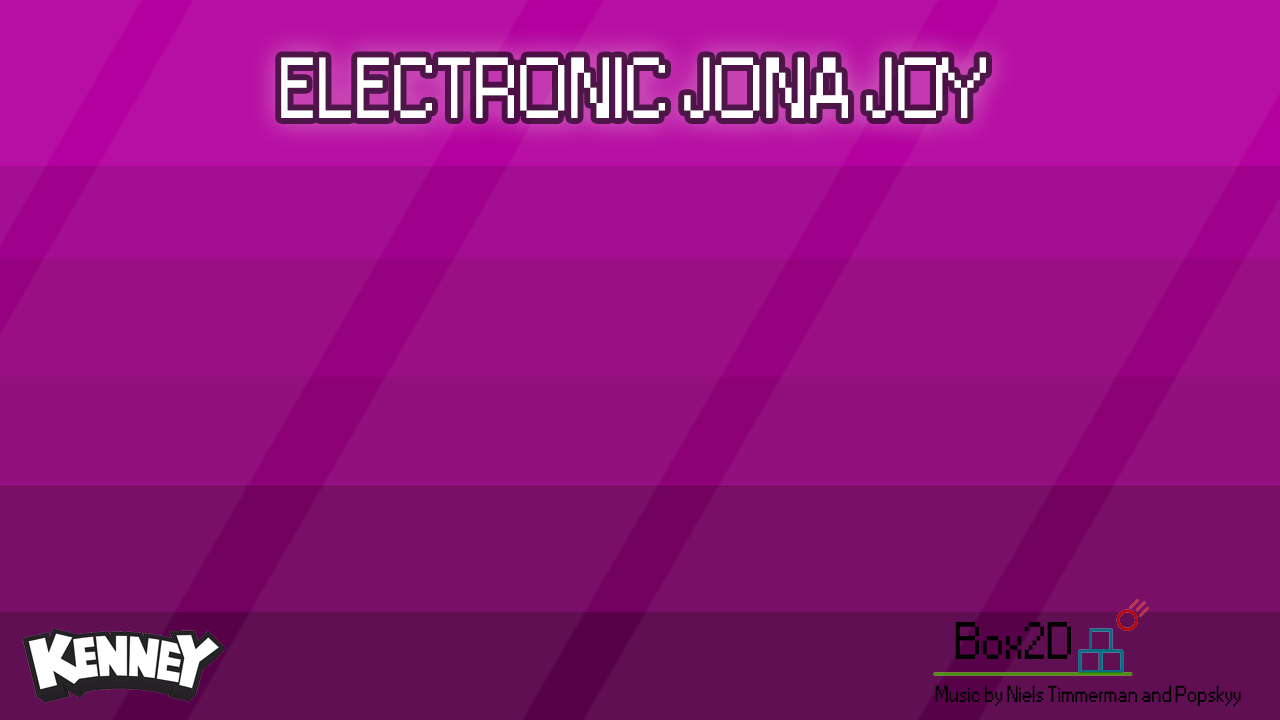
<style>
.page{position:relative;width:1280px;height:720px}
.page>*{position:absolute;margin:0}
.t1{font:80.6px "Small Fonts";color:#ffffff}
.t2{font:49.3px "Small Fonts";color:#000000}
.t3{font:21.8px "Small Fonts";color:#000000}
</style>
<div class="page">
<p class="t1" style="left:281px;top:57px;width:705px;height:61px">ELECTRONIC JONA JOY</p>
<p class="t2" style="left:955px;top:622px;width:116px;height:37px">Box2D</p>
<p class="t3" style="left:935px;top:685px;width:306px;height:21px">Music by Niels Timmerman and Popskyy</p>
</div>
